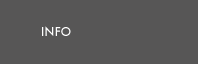
<style>
.page{position:relative;width:198px;height:64px;background:#575656}
.page>*{position:absolute;margin:0}
.t1{font:12px "Futura-Medium";color:#ffffff}
</style>
<div class="page">
<p class="t1" style="left:42px;top:26px;width:29px;height:10px">INFO</p>
</div>
